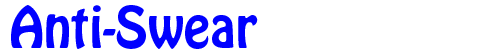
<style>
.page{position:relative;width:500px;height:55px;background:#ffffff}
.page>*{position:absolute;margin:0}
.t1{font:50px "HoboStd";color:#0000ff}
</style>
<div class="page">
<p class="t1" style="left:11px;top:5px;width:247px;height:44px">Anti-Swear</p>
</div>
